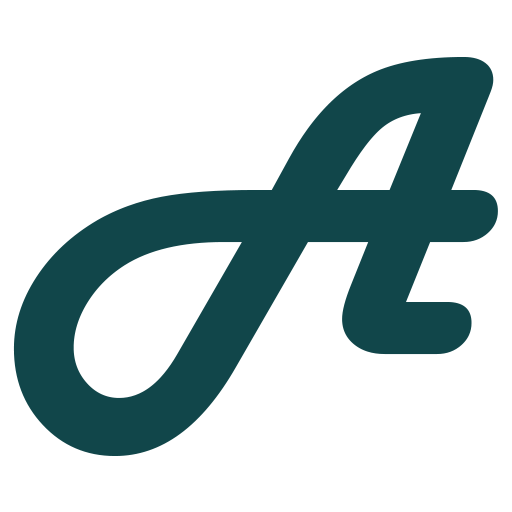
<style>
.page{position:relative;width:512px;height:512px;background:#ffffff}
.page>*{position:absolute;margin:0}
.t1{font:445.8px "HarlowSolid";color:#11464a}
</style>
<div class="page">
<p class="t1" style="left:13px;top:57px;width:485px;height:399px">A</p>
</div>
